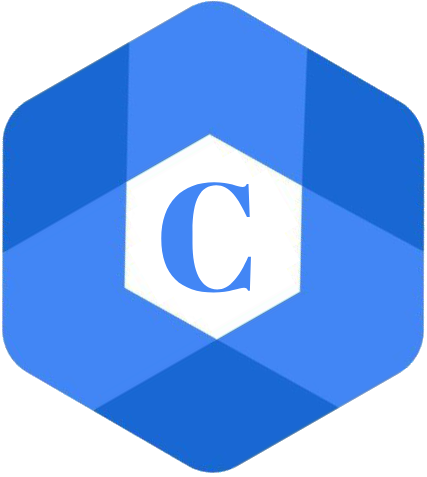
<style>
.page{position:relative;width:427px;height:477px;background:#ffffff}
.page>*{position:absolute;margin:0}
.t1{font:153px "AbrilFatface-Regular";color:#4286f5}
</style>
<div class="page">
<p class="t1" style="left:161px;top:182px;width:90px;height:111px">C</p>
</div>
